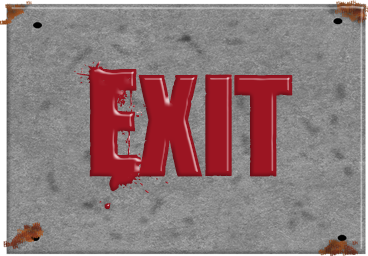
<style>
.page{position:relative;width:368px;height:256px}
.page>*{position:absolute;margin:0}
.t1{font:150px "LivingHell";color:#9b1522}
</style>
<div class="page">
<p class="t1" style="left:74px;top:61px;width:219px;height:148px">Exit</p>
</div>
